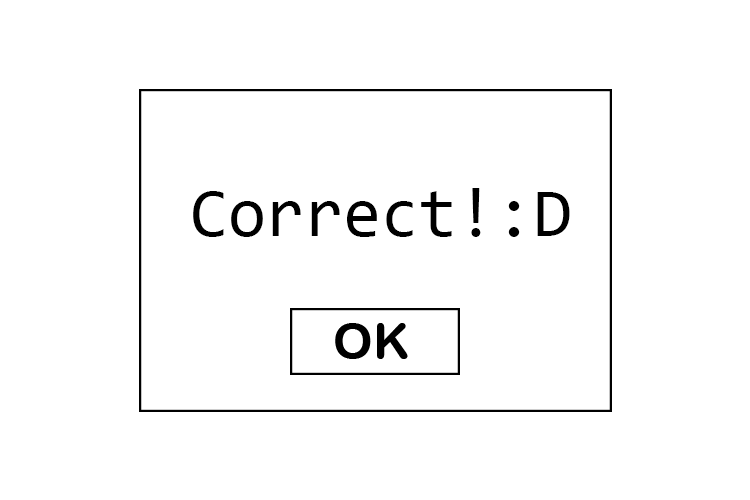
<style>
.page{position:relative;width:750px;height:500px;background:#ffffff}
.page>*{position:absolute;margin:0}
.t1{font:69.4px "Consolas";color:#000000}
</style>
<div class="page">
<p class="t1" style="left:193px;top:188px;width:377px;height:49px">Correct!:D</p>
</div>
